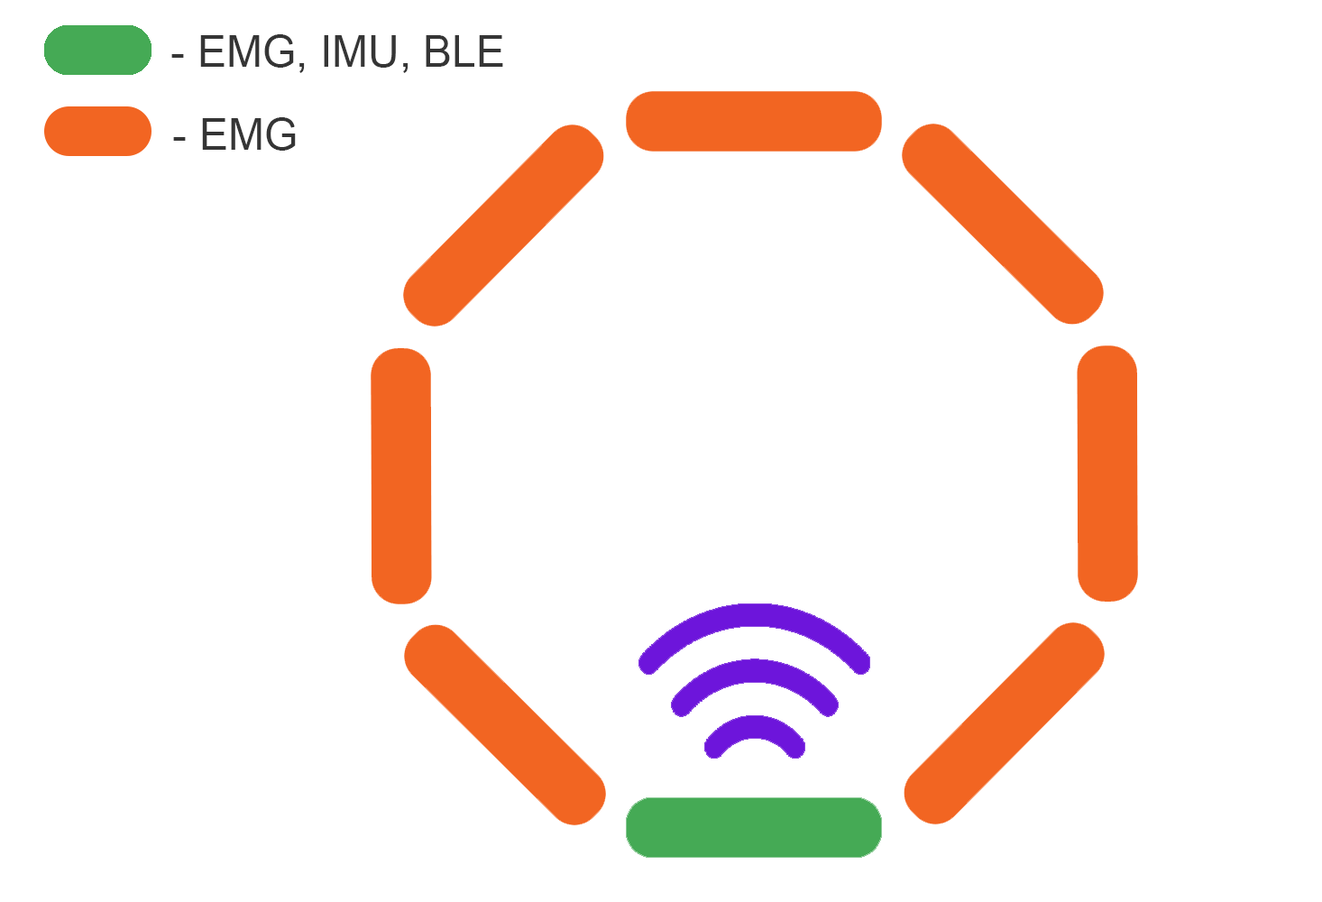
<style>
.page{position:relative;width:1322px;height:902px;background:#ffffff}
.page>*{position:absolute;margin:0}
.t1{font:43.3px "ArialMT";color:#353535}
</style>
<div class="page">
<p class="t1" style="left:171px;top:34px;width:332px;height:39px">- EMG, IMU, BLE</p>
<p class="t1" style="left:173px;top:117px;width:123px;height:34px">- EMG</p>
</div>
